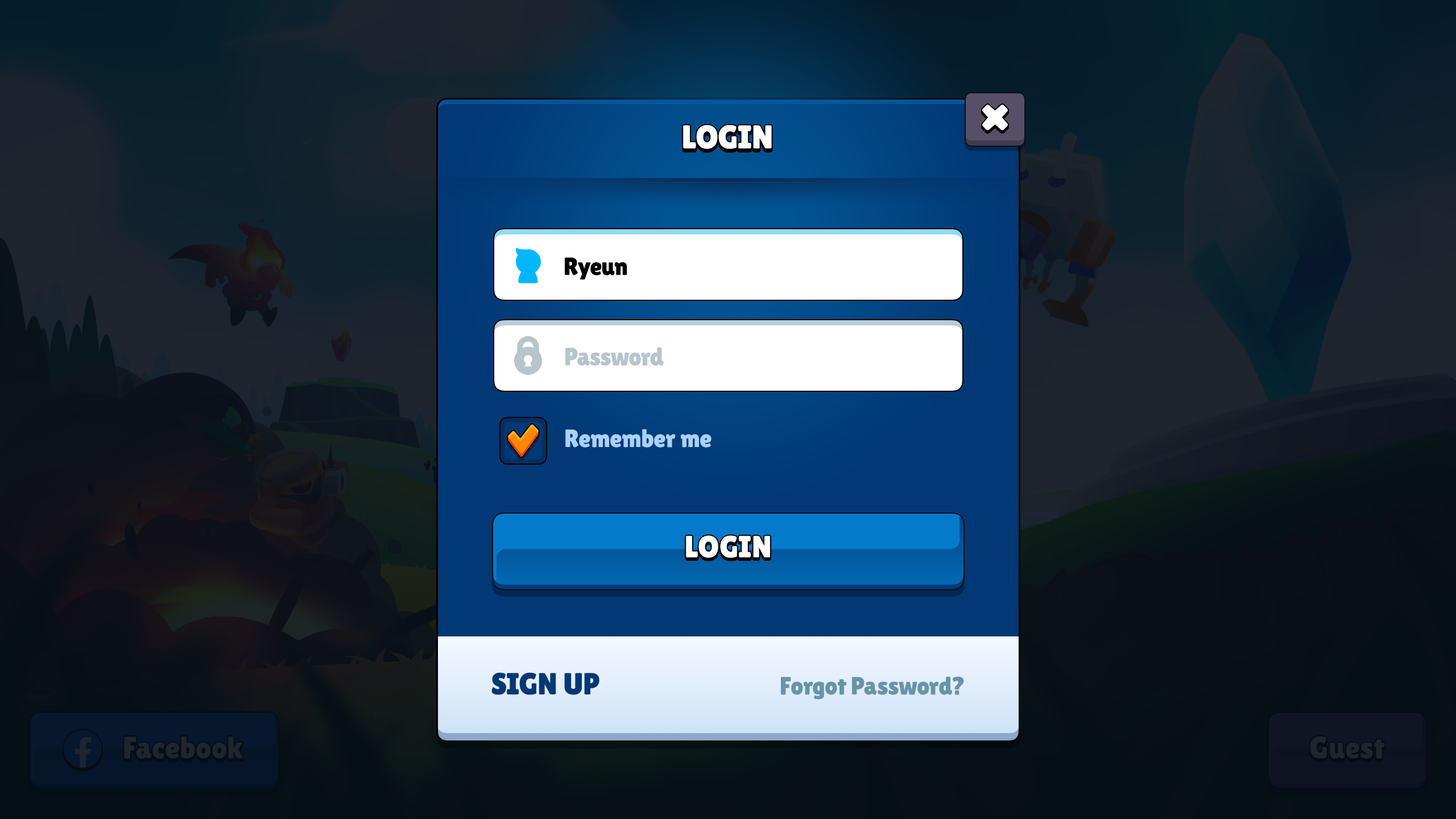
<style>
.page{position:relative;width:1456px;height:819px}
.page>*{position:absolute;margin:0}
.t1{font:33px "LilitaOne";color:#ffffff;text-transform:uppercase}
.t2{font:25px "LilitaOne";letter-spacing:-0.025em;color:#000000}
.t3{font:25px "LilitaOne";letter-spacing:-0.025em;color:#b7c4cb}
.t4{font:25px "LilitaOne";color:#aad0fd}
.t5{font:30.7px "LilitaOne";letter-spacing:0.02em;color:#ffffff;text-transform:uppercase}
.t6{font:30.7px "LilitaOne";color:#023875;text-transform:uppercase}
.t7{font:25px "LilitaOne";color:#6794a9}
</style>
<div class="page">
<p class="t1" style="left:683px;top:125px;width:89px;height:24px">Login</p>
<p class="t2" style="left:565px;top:257px;width:62px;height:23px">Ryeun</p>
<p class="t3" style="left:565px;top:348px;width:99px;height:18px">Password</p>
<p class="t4" style="left:565px;top:429px;width:146px;height:19px">Remember me</p>
<p class="t5" style="left:686px;top:535px;width:84px;height:23px">Login</p>
<p class="t6" style="left:491px;top:672px;width:108px;height:23px">Sign up</p>
<p class="t7" style="left:781px;top:676px;width:183px;height:24px">Forgot Password?</p>
</div>
